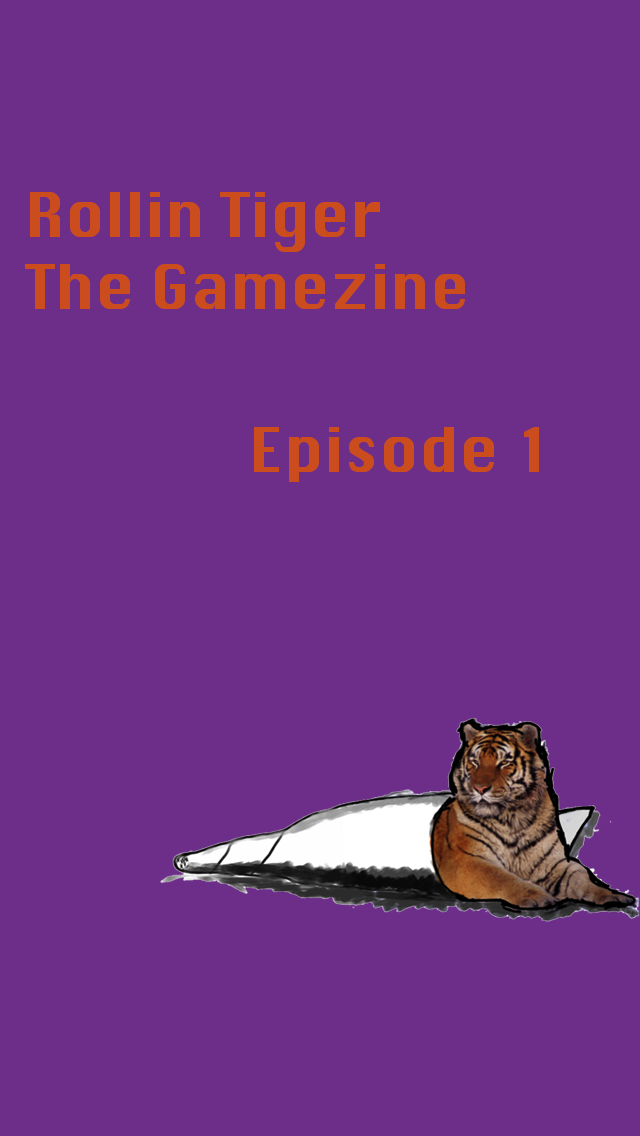
<style>
.page{position:relative;width:640px;height:1136px;background:#6c2e88}
.page>*{position:absolute;margin:0}
.t1{font:60px "Krungthep";color:#cb4d1e}
</style>
<div class="page">
<p class="t1" style="left:25px;top:192px;width:440px;height:117px">Rollin Tiger<br>The Gamezine</p>
<p class="t1" style="left:254px;top:427px;width:285px;height:55px">Episode 1</p>
</div>
